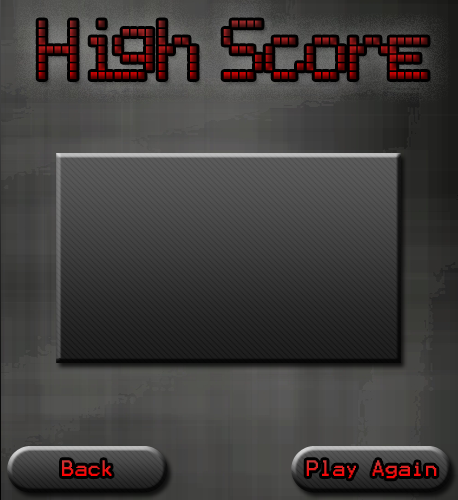
<style>
.page{position:relative;width:458px;height:500px}
.page>*{position:absolute;margin:0}
.t1{font:78.1px "TexasLED";letter-spacing:-0.02em}
.t2{font:18px "Terminal";letter-spacing:-0.02em;color:#e81616}
.t3{font:18px "Terminal";letter-spacing:-0.02em;color:#e71717}
</style>
<div class="page">
<p class="t1" style="left:38px;top:20px;width:390px;height:59px">High Score</p>
<p class="t2" style="left:62px;top:460px;width:50px;height:16px">Back</p>
<p class="t3" style="left:306px;top:460px;width:131px;height:19px">Play Again</p>
</div>
